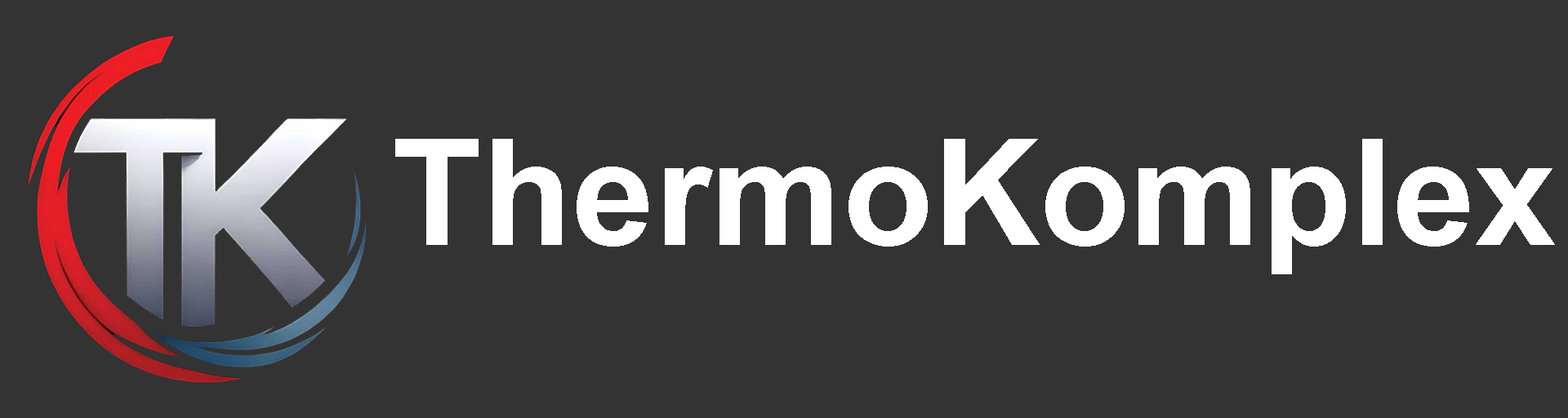
<style>
.page{position:relative;width:1568px;height:418px;background:#333333}
.page>*{position:absolute;margin:0}
.t1{font:147.6px "Arial-BoldMT";color:#ffffff}
</style>
<div class="page">
<p class="t1" style="left:395px;top:139px;width:1160px;height:135px">ThermoKomplex</p>
</div>
